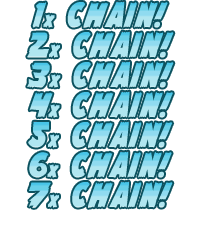
<style>
.page{position:relative;width:200px;height:240px;background:#ffffff}
.page>*{position:absolute;margin:0}
.t1{font:48px "Flying-Leatherneck";text-transform:uppercase;scale:0.9 1}
.t2{font:24px "Flying-Leatherneck";text-transform:uppercase;scale:0.9 1}
</style>
<div class="page">
<p class="t1" style="left:32px;top:1px;width:136px;height:27px">1<span class="t2">x</span> Chain!</p>
<p class="t1" style="left:27px;top:31px;width:147px;height:27px">2<span class="t2">x</span> Chain!</p>
<p class="t1" style="left:27px;top:61px;width:147px;height:27px">3<span class="t2">x</span> Chain!</p>
<p class="t1" style="left:29px;top:91px;width:144px;height:27px">4<span class="t2">x</span> Chain!</p>
<p class="t1" style="left:28px;top:121px;width:145px;height:27px">5<span class="t2">x</span> Chain!</p>
<p class="t1" style="left:29px;top:151px;width:143px;height:27px">6<span class="t2">x</span> Chain!</p>
<p class="t1" style="left:28px;top:181px;width:145px;height:27px">7<span class="t2">x</span> Chain!</p>
</div>
